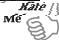
<style>
.page{position:relative;width:59px;height:40px;background:#ffffff}
.page>*{position:absolute;margin:0}
.t1{font:12px/30px "BookAntiqua-Bold";letter-spacing:0.005em;font-weight:bold}
.t2{font:12px/12px "BookAntiqua-Bold";letter-spacing:0.005em;font-weight:bold}
</style>
<div class="page">
<p class="t1" style="left:3px;top:1px;width:26px;height:22px">Rate<br><span class="t2">Me</span></p>
</div>
